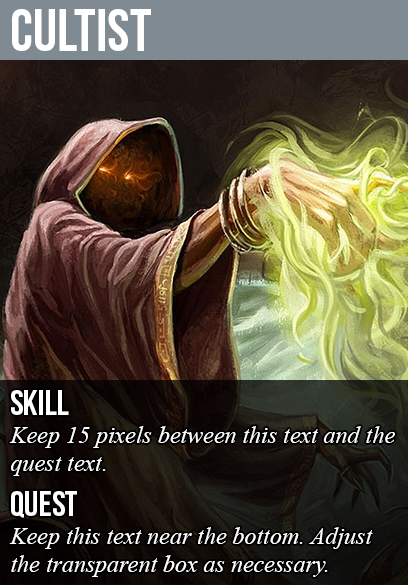
<style>
.page{position:relative;width:408px;height:585px}
.page>*{position:absolute;margin:0}
.t1{font:60px "BebasNeue";color:#ffffff}
.t2{font:36px "BebasNeue";color:#ffffff}
.t3{font:24px "TimesNewRomanPS-ItalicMT";color:#ffffff}
</style>
<div class="page">
<p class="t1" style="left:12px;top:9px;width:139px;height:42px">cultist</p>
<p class="t2" style="left:11px;top:390px;width:58px;height:25px">skill</p>
<p class="t3" style="left:9px;top:426px;width:386px;height:50px">Keep 15 pixels between this text and the<br>quest text.</p>
<p class="t2" style="left:11px;top:491px;width:66px;height:27px">quest</p>
<p class="t3" style="left:9px;top:527px;width:364px;height:50px">Keep this text near the bottom. Adjust<br>the transparent box as necessary.</p>
</div>
